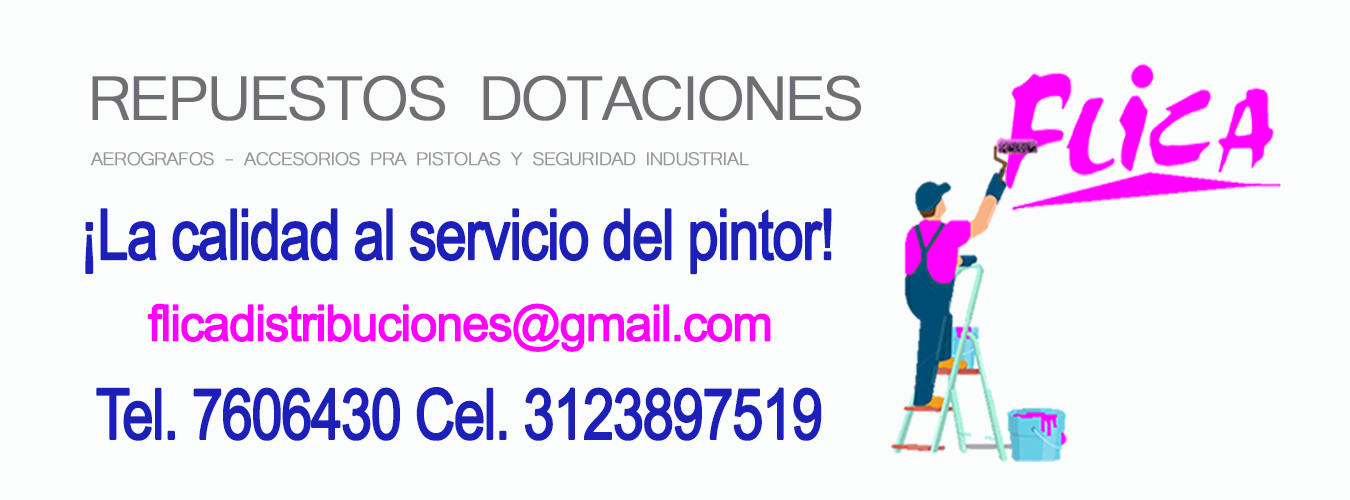
<style>
.page{position:relative;width:1350px;height:500px;background:#fbfcfc}
.page>*{position:absolute;margin:0}
.t1{font:80px "Microsoft-Yi-Baiti";letter-spacing:-0.05em;color:#6f6e72;font-weight:bold}
.t2{font:24px "Microsoft-Yi-Baiti";letter-spacing:-0.05em;color:#989899;font-weight:bold}
.t3{font:52.4px "ArialMT";letter-spacing:-0.05em;color:#1c1fb8;font-weight:bold;scale:0.8 1}
.t4{font:37.3px "ArialMT";letter-spacing:-0.05em;color:#ff00ff;font-weight:bold}
</style>
<div class="page">
<p class="t1" style="left:92px;top:75px;width:769px;height:46px">REPUESTOS DOTACIONES</p>
<p class="t2" style="left:90px;top:152px;width:659px;height:14px">AEROGRAFOS - ACCESORIOS PRA PISTOLAS Y SEGURIDAD INDUSTRIAL</p>
<p class="t3" style="left:85px;top:208px;width:747px;height:67px">¡La calidad al servicio del pintor!</p>
<p class="t4" style="left:147px;top:303px;width:624px;height:49px">flicadistribuciones@gmail.com</p>
<p class="t3" style="left:96px;top:387px;width:726px;height:54px">Tel. 7606430 Cel. 3123897519</p>
</div>
